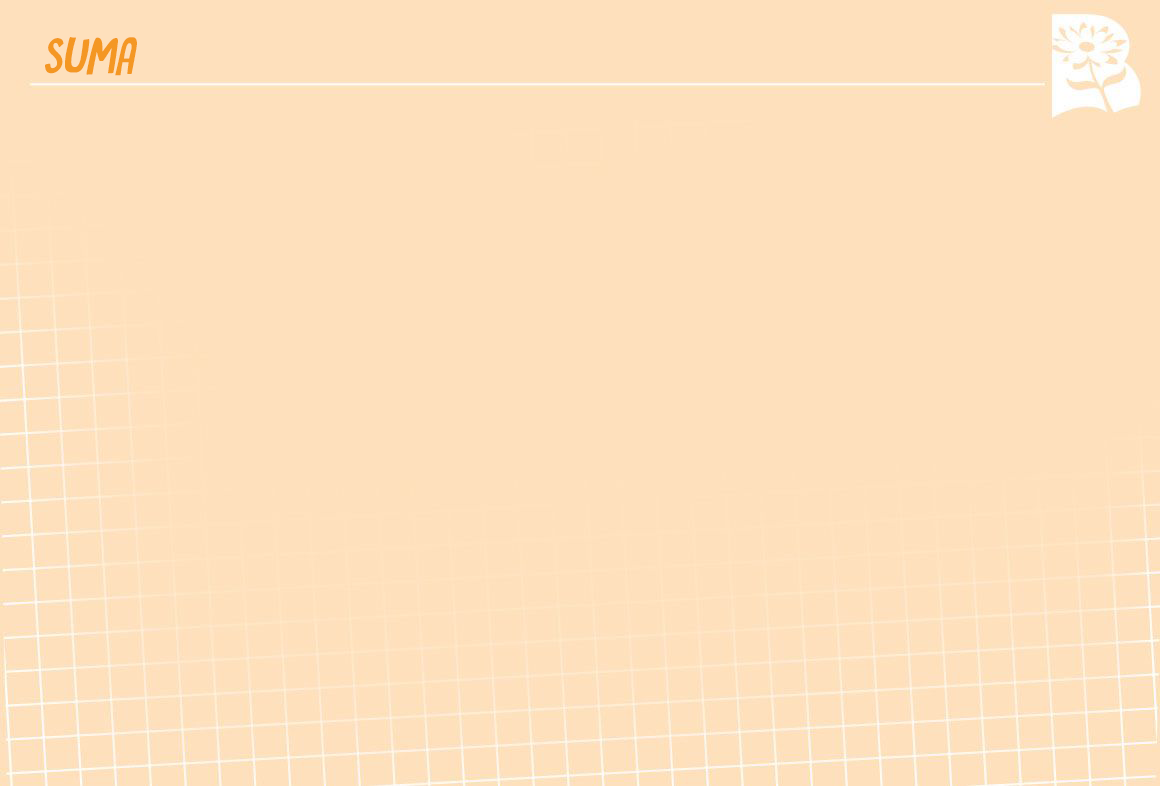
<style>
.page{position:relative;width:1160px;height:786px;background:#fee0bc}
.page>*{position:absolute;margin:0}
.t1{font:46px "DKButterflyBall";color:#f49723;font-style:italic}
</style>
<div class="page">
<p class="t1" style="left:45px;top:37px;width:92px;height:39px">SUMA</p>
</div>
